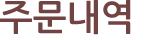
<style>
.page{position:relative;width:150px;height:40px;background:#ffffff}
.page>*{position:absolute;margin:0}
.t1{font:36px "NanumGothicBold";color:#724343}
</style>
<div class="page">
<p class="t1" style="left:0px;top:0px;width:131px;height:35px">주문내역</p>
</div>
